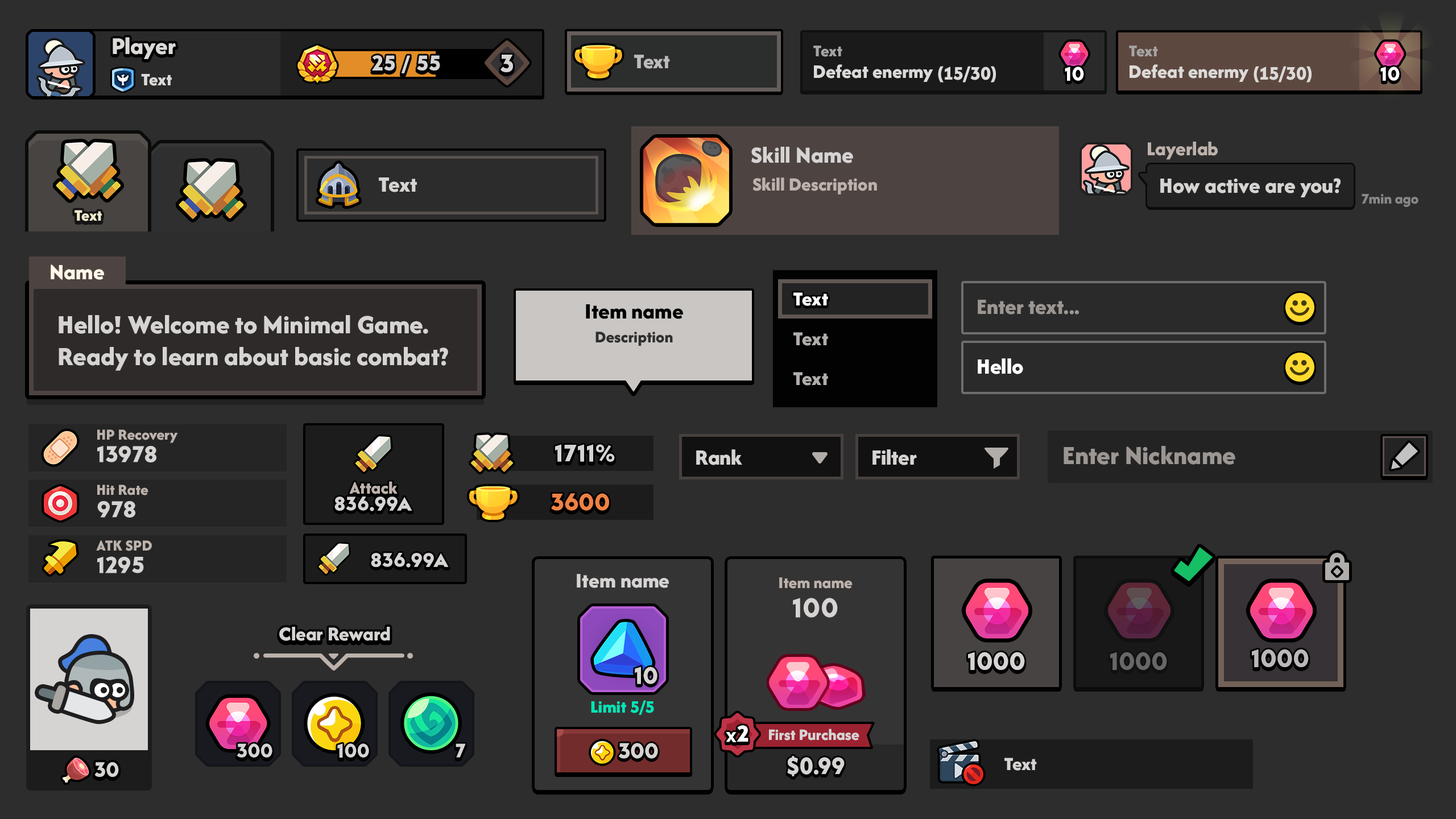
<style>
.page{position:relative;width:1456px;height:819px;background:#2d2d2d}
.page>*{position:absolute;margin:0}
.t1{font:25px "AfacadFlux-ExtraBold";color:#dcdad8}
.t2{font:17.1px "AfacadFlux-ExtraBold";color:#a5a5a5}
.t3{font:22.2px "LTAvocado-Bold";color:#d6d4d3;text-transform:uppercase}
.t4{font:26.2px "LTAvocado-Bold";color:#d6d4d3;text-transform:uppercase}
.t5{font:21.6px "AfacadFlux-ExtraBold";color:#bcbbba}
.t6{font:19.9px "AfacadFlux-ExtraBold";color:#dcdad8}
.t7{font:18.2px "AfacadFlux-ExtraBold";color:#dcdad8}
.t8{font:20.5px "LTAvocado-Bold";color:#ffffff}
.t9{font:23.9px "AfacadFlux-ExtraBold";color:#d6d4d3}
.t10{font:20.5px "AfacadFlux-ExtraBold";color:#bdb2ac}
.t11{font:22.7px "AfacadFlux-ExtraBold";color:#d6d4d3}
.t12{font:19.3px "AfacadFlux-ExtraBold";color:#bdb2ac}
.t13{font:15.4px "AfacadFlux-ExtraBold";color:#878787}
.t14{font:16.5px "AfacadFlux-ExtraBold";color:#f1ebcc}
.t15{font:22.7px "AfacadFlux-ExtraBold";color:#fff8e9}
.t16{font:20.5px/39.8px "AfacadFlux-ExtraBold";color:#b0adaa}
.t17{font:20.5px/39.8px "AfacadFlux-ExtraBold";color:#ffffff}
.t18{font:22.7px "AfacadFlux-ExtraBold";color:#000000}
.t19{font:22.7px "AfacadFlux-ExtraBold";color:#9b9692}
.t20{font:27.3px/31.8px "AfacadFlux-ExtraBold";color:#d6d4d3}
.t21{font:17.1px "AfacadFlux-ExtraBold";color:#2f2f2f}
.t22{font:22.7px "AfacadFlux-ExtraBold";color:#ffffff}
.t23{font:15.9px "AfacadFlux-ExtraBold";color:#bdb2ac}
.t24{font:23.9px "LTAvocado-Bold";color:#d6d4d3}
.t25{font:25px "LTAvocado-Bold";color:#d6d4d3}
.t26{font:27.3px "AfacadFlux-ExtraBold";color:#9b9692}
.t27{font:18.2px "AfacadFlux-ExtraBold";color:#bdb2ac}
.t28{font:20.5px "LTAvocado-Bold";color:#d6d4d3}
.t29{font:25px "LTAvocado-Bold";color:#ee8145}
.t30{font:21.6px "AfacadFlux-ExtraBold";color:#d6d4d3}
.t31{font:17.1px "AfacadFlux-ExtraBold";color:#bdb2ac}
.t32{font:28.4px "LTAvocado-Bold";color:#d6d4d3}
.t33{font:20.5px "AfacadFlux-ExtraBold";color:#d6d4d3}
.t34{font:26.2px "LTAvocado-Bold";color:#d6d4d3}
.t35{font:26.2px "LTAvocado-Bold";color:#686767}
.t36{font:26.2px "LTAvocado-Bold";color:#bbb9b8;text-transform:uppercase}
.t37{font:18.2px "AfacadFlux-ExtraBold";color:#03e5b6}
.t38{font:21.5px "LTAvocado-Bold";letter-spacing:-0.025em;color:#ffffff}
.t39{font:23.7px "LTAvocado-Bold";letter-spacing:-0.025em;color:#ffffff}
.t40{font:16.5px "AfacadFlux-ExtraBold";color:#d6d4d3}
.t41{font:22.7px "LTAvocado-Bold";color:#d6d4d3}
.t42{font:26.2px "AfacadFlux-ExtraBold";color:#d6d4d3}
.t43{font:19.3px "AfacadFlux-ExtraBold";color:#d6d4d3}
.t44{font:21.6px "LTAvocado-Bold";color:#d6d4d3}
</style>
<div class="page">
<p class="t1" style="left:113px;top:37px;width:63px;height:22px">Player</p>
<p class="t2" style="left:813px;top:45px;width:29px;height:12px">Text</p>
<p class="t2" style="left:1129px;top:45px;width:29px;height:12px">Text</p>
<p class="t3" style="left:372px;top:55px;width:68px;height:18px">25 / 55</p>
<p class="t4" style="left:500px;top:55px;width:13px;height:17px">3</p>
<p class="t5" style="left:634px;top:55px;width:36px;height:14px">Text</p>
<p class="t6" style="left:814px;top:64px;width:182px;height:18px">Defeat enermy (15/30)</p>
<p class="t6" style="left:1130px;top:64px;width:182px;height:18px">Defeat enermy (15/30)</p>
<p class="t7" style="left:141px;top:74px;width:31px;height:12px">Text</p>
<p class="t8" style="left:1065px;top:67px;width:19px;height:14px">10</p>
<p class="t8" style="left:1380px;top:67px;width:20px;height:14px">10</p>
<p class="t9" style="left:751px;top:147px;width:102px;height:16px">Skill Name</p>
<p class="t10" style="left:1148px;top:142px;width:70px;height:18px">Layerlab</p>
<p class="t11" style="left:379px;top:177px;width:38px;height:15px">Text</p>
<p class="t12" style="left:753px;top:177px;width:124px;height:18px">Skill Description</p>
<p class="t11" style="left:1160px;top:178px;width:181px;height:19px">How active are you?</p>
<p class="t13" style="left:1362px;top:194px;width:56px;height:13px">7min ago</p>
<p class="t14" style="left:75px;top:210px;width:27px;height:11px">Text</p>
<p class="t15" style="left:51px;top:264px;width:53px;height:16px">Name</p>
<p class="t16" style="left:793px;top:292px;width:35px;height:94px"><span class="t17">Text<br></span>Text<br>Text</p>
<p class="t18" style="left:586px;top:304px;width:97px;height:15px">Item name</p>
<p class="t19" style="left:978px;top:300px;width:101px;height:15px">Enter text...</p>
<p class="t20" style="left:59px;top:315px;width:389px;height:56px">Hello! Welcome to Minimal Game. <br>Ready to learn about basic combat?</p>
<p class="t21" style="left:595px;top:332px;width:78px;height:14px">Description</p>
<p class="t22" style="left:978px;top:358px;width:45px;height:16px">Hello</p>
<p class="t23" style="left:97px;top:429px;width:81px;height:14px">HP Recovery</p>
<p class="t24" style="left:97px;top:446px;width:59px;height:16px">13978</p>
<p class="t25" style="left:555px;top:444px;width:60px;height:18px">1711%</p>
<p class="t11" style="left:696px;top:449px;width:46px;height:16px">Rank</p>
<p class="t11" style="left:872px;top:449px;width:45px;height:16px">Filter</p>
<p class="t26" style="left:1064px;top:446px;width:171px;height:19px">Enter Nickname</p>
<p class="t23" style="left:97px;top:485px;width:51px;height:10px">Hit Rate</p>
<p class="t27" style="left:349px;top:481px;width:49px;height:13px">Attack</p>
<p class="t28" style="left:334px;top:497px;width:78px;height:14px">836.99A</p>
<p class="t29" style="left:551px;top:493px;width:58px;height:18px">3600</p>
<p class="t24" style="left:97px;top:501px;width:38px;height:17px">978</p>
<p class="t23" style="left:96px;top:540px;width:56px;height:11px">ATK SPD</p>
<p class="t24" style="left:97px;top:556px;width:47px;height:17px">1295</p>
<p class="t28" style="left:371px;top:553px;width:78px;height:15px">836.99A</p>
<p class="t30" style="left:577px;top:574px;width:92px;height:14px">Item name</p>
<p class="t31" style="left:779px;top:577px;width:74px;height:12px">Item name</p>
<p class="t32" style="left:793px;top:598px;width:45px;height:20px">100</p>
<p class="t33" style="left:279px;top:627px;width:111px;height:14px">Clear Reward</p>
<p class="t34" style="left:968px;top:652px;width:57px;height:18px">1000</p>
<p class="t35" style="left:1110px;top:652px;width:57px;height:18px">1000</p>
<p class="t36" style="left:1252px;top:649px;width:57px;height:18px">1000</p>
<p class="t25" style="left:635px;top:667px;width:22px;height:17px">10</p>
<p class="t37" style="left:591px;top:700px;width:63px;height:15px">Limit 5/5</p>
<p class="t38" style="left:726px;top:725px;width:22px;height:17px">x<span class="t39">2</span></p>
<p class="t40" style="left:769px;top:729px;width:90px;height:12px">First Purchase</p>
<p class="t28" style="left:237px;top:743px;width:35px;height:15px">300</p>
<p class="t28" style="left:337px;top:743px;width:32px;height:15px">100</p>
<p class="t28" style="left:456px;top:743px;width:10px;height:15px">7</p>
<p class="t41" style="left:619px;top:743px;width:39px;height:16px">300</p>
<p class="t42" style="left:787px;top:756px;width:58px;height:20px">$0.99</p>
<p class="t43" style="left:1004px;top:758px;width:33px;height:13px">Text</p>
<p class="t44" style="left:94px;top:762px;width:25px;height:15px">30</p>
</div>
